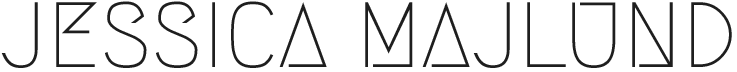
<style>
.page{position:relative;width:737px;height:72px;background:#ffffff}
.page>*{position:absolute;margin:0}
.t1{font:92.3px "Megrim";color:#1e1e1e}
</style>
<div class="page">
<p class="t1" style="left:1px;top:1px;width:731px;height:67px">JESSICA MAJLUND</p>
</div>
